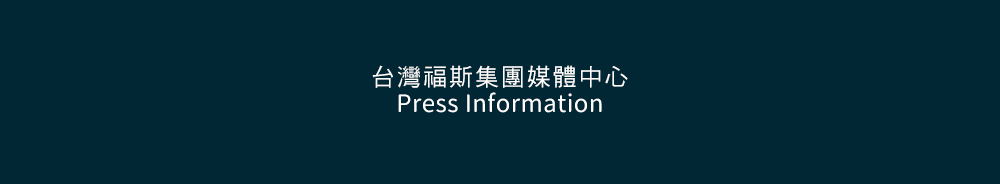
<style>
.page{position:relative;width:1000px;height:184px;background:#002733}
.page>*{position:absolute;margin:0}
.t1{font:24px "DFHei-W5-WINP-BF";letter-spacing:0.08em;color:#fffefe}
.t2{font:24px "GenSenMaruGothicTW-Regular-TTF";letter-spacing:0.02em;color:#fffefe}
</style>
<div class="page">
<p class="t1" style="left:372px;top:65px;width:256px;height:23px">台灣福斯集團媒體中心</p>
<p class="t2" style="left:398px;top:92px;width:204px;height:21px">Press Information</p>
</div>
